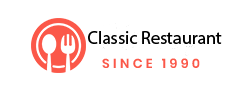
<style>
.page{position:relative;width:228px;height:88px;background:#ffffff}
.page>*{position:absolute;margin:0}
.t1{font:18px "MyriadPro-Regular";color:#000000}
</style>
<div class="page">
<p class="t1" style="left:88px;top:31px;width:134px;height:13px">Classic Restaurant</p>
</div>
